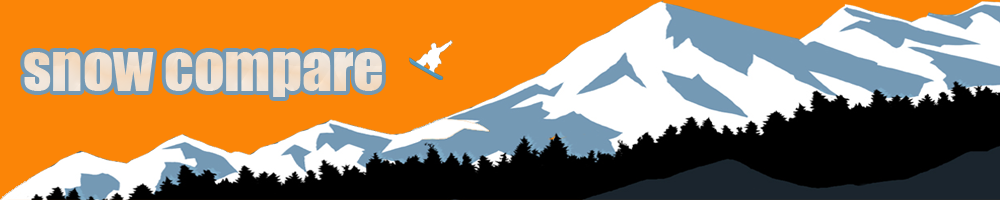
<style>
.page{position:relative;width:1000px;height:200px;background:#fb8507}
.page>*{position:absolute;margin:0}
.t1{font:60px "Impact";color:#f1e0ce}
</style>
<div class="page">
<p class="t1" style="left:24px;top:52px;width:358px;height:45px">snow compare</p>
</div>
